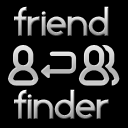
<style>
.page{position:relative;width:128px;height:128px;background:#000000}
.page>*{position:absolute;margin:0}
.t1{font:34px "StarAvenue"}
</style>
<div class="page">
<p class="t1" style="left:14px;top:6px;width:95px;height:30px">Friend</p>
<p class="t1" style="left:14px;top:89px;width:95px;height:30px">finder</p>
</div>
